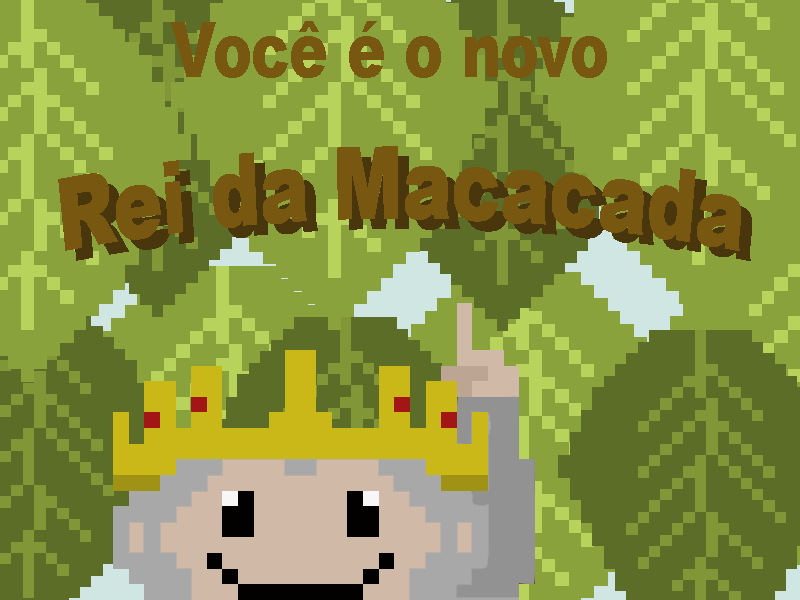
<style>
.page{position:relative;width:800px;height:600px;background:#8aa23c}
.page>*{position:absolute;margin:0}
.t1{font:77px "Arial-Black";color:#785711;scale:0.75 1}
.t2{font:98.6px "Arial-Black";color:#785711;scale:0.73 1}
.t3{font:98.6px "Arial-Black";scale:0.73 1}
</style>
<div class="page">
<p class="t1" style="left:171px;top:21px;width:436px;height:57px">Você é o novo</p>
<p class="t2" style="left:58px;top:146px;width:683px;height:105px">Rei da Macacada</p>
<p class="t3" style="left:69px;top:156px;width:683px;height:105px">Rei da Macacada</p>
</div>
